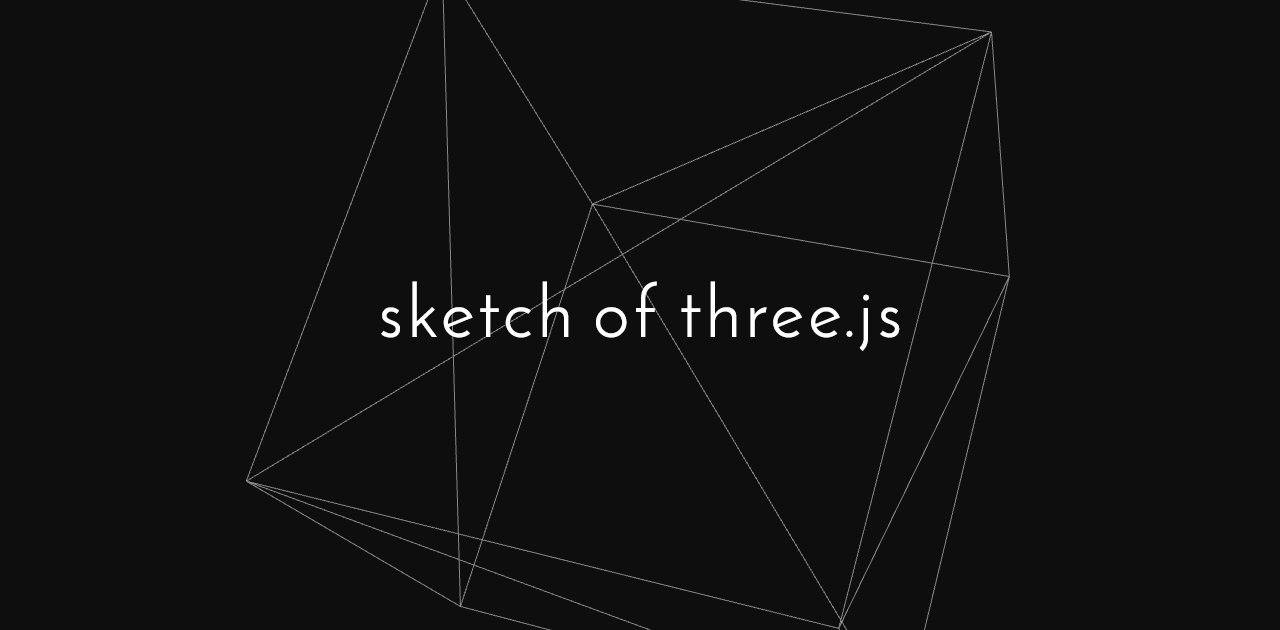
<style>
.page{position:relative;width:1280px;height:630px;background:#0e0e0e}
.page>*{position:absolute;margin:0}
.t1{font:72px "JosefinSans";letter-spacing:0.07em;color:#ffffff}
</style>
<div class="page">
<p class="t1" style="left:381px;top:281px;width:519px;height:70px">sketch of three.js</p>
</div>
